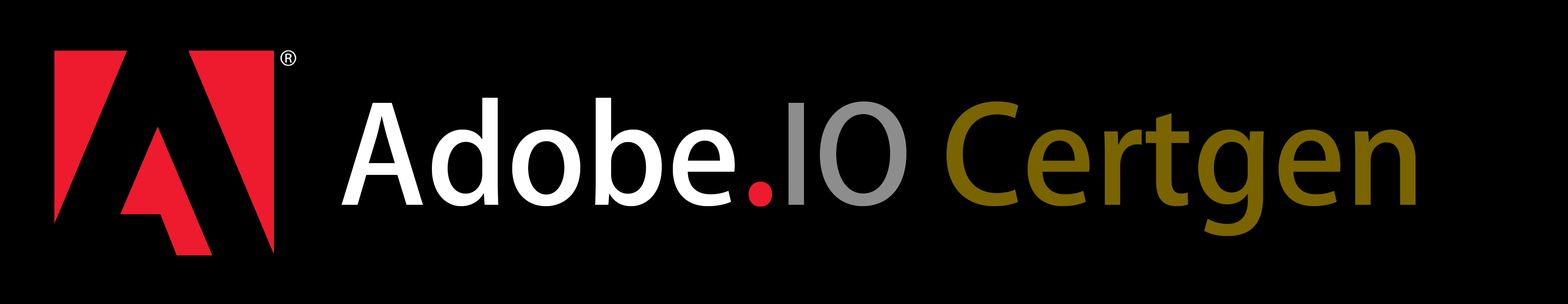
<style>
.page{position:relative;width:1568px;height:304px;background:#000000}
.page>*{position:absolute;margin:0}
.t1{font:133.1px "AdobeFanHeitiStd-Bold";color:#7a6400}
.t2{font:133.1px "AdobeFanHeitiStd-Bold";color:#ffffff}
.t3{font:157.3px "AdobeFanHeitiStd-Bold";color:#ee1b2e}
.t4{font:133.1px "AdobeFanHeitiStd-Bold";color:#8d8d8d}
</style>
<div class="page">
<p class="t1" style="left:342px;top:98px;width:1074px;height:138px"><span class="t2">Adobe</span><span class="t3">.</span><span class="t4">IO </span>Certgen</p>
</div>
